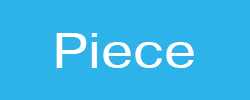
<style>
.page{position:relative;width:250px;height:100px;background:#2db2ea}
.page>*{position:absolute;margin:0}
.t1{font:48px "Helvetica";color:#ffffff;scale:1.2 1}
</style>
<div class="page">
<p class="t1" style="left:56px;top:33px;width:138px;height:35px">Piece</p>
</div>
